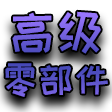
<style>
.page{position:relative;width:112px;height:112px}
.page>*{position:absolute;margin:0}
.t1{font:36px "HappyZcool-2016"}
.t2{font:48px "HappyZcool-2016"}
</style>
<div class="page">
<p class="t1" style="left:5px;top:11px;width:103px;height:86px;text-align:center"><span class="t2">高级<br></span>零部件</p>
</div>
